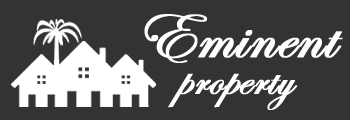
<style>
.page{position:relative;width:350px;height:120px;background:#333333}
.page>*{position:absolute;margin:0}
.t1{font:49.8px/37.3px "EdwardianScriptITC";color:#ffffff;font-weight:bold}
.t2{font:68.4px/37.3px "EdwardianScriptITC";color:#ffffff;font-weight:bold}
</style>
<div class="page">
<p class="t1" style="left:144px;top:14px;width:199px;height:96px;text-align:center"><span class="t2">Eminent<br></span>property</p>
</div>
